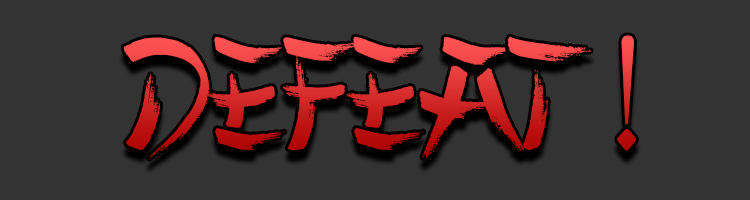
<style>
.page{position:relative;width:750px;height:200px;background:#333333}
.page>*{position:absolute;margin:0}
.t1{font:161.3px "ChineseTakeaway";scale:0.95 1}
</style>
<div class="page">
<p class="t1" style="left:123px;top:35px;width:513px;height:124px">Defeat !</p>
</div>
